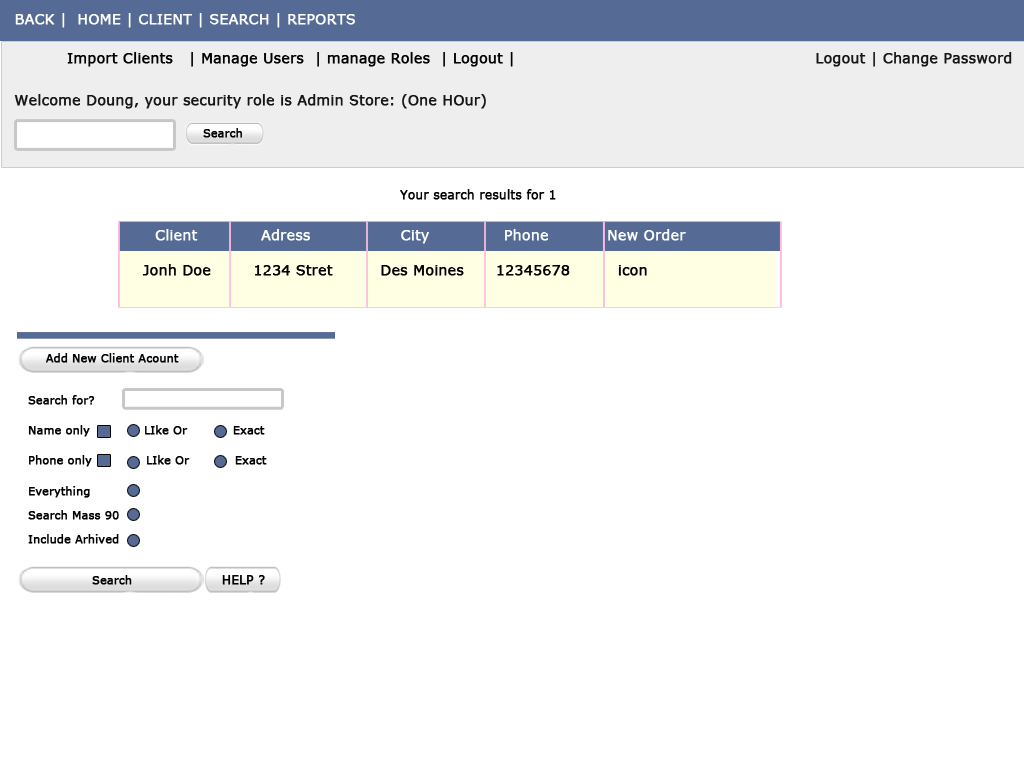
<style>
.page{position:relative;width:1024px;height:768px;background:#ffffff}
.page>*{position:absolute;margin:0}
.t1{font:14px "Verdana";color:#ffffff;text-transform:uppercase;font-weight:bold}
.t2{font:14px "Verdana";color:#000000;font-weight:bold}
.t3{font:14px "Verdana";color:#161616;font-weight:bold}
.t4{font:11px "Verdana";color:#000000;font-weight:bold}
.t5{font:12px "Verdana";color:#000000;font-weight:bold}
.t6{font:14px "Verdana";color:#ffffff;font-weight:bold}
.t7{font:11px/24px "Verdana";color:#000000;font-weight:bold}
.t8{font:12px "Verdana";color:#000000;text-transform:uppercase;font-weight:bold}
</style>
<div class="page">
<p class="t1" style="left:15px;top:13px;width:340px;height:15px">Back |  home | client | search | reports</p>
<p class="t2" style="left:67px;top:52px;width:446px;height:15px">Import Clients   | Manage Users  | manage Roles  | Logout |</p>
<p class="t3" style="left:816px;top:52px;width:196px;height:15px">Logout | Change Password</p>
<p class="t3" style="left:14px;top:94px;width:472px;height:15px">Welcome Doung, your security role is Admin Store: (One HOur)</p>
<p class="t4" style="left:203px;top:128px;width:39px;height:10px">Search</p>
<p class="t5" style="left:400px;top:189px;width:156px;height:11px">Your search results for 1</p>
<p class="t6" style="left:155px;top:229px;width:531px;height:15px">Client            Adress                 City              Phone           New Order</p>
<p class="t2" style="left:142px;top:264px;width:505px;height:12px">Jonh Doe        1234 Stret         Des Moines      12345678         icon</p>
<p class="t4" style="left:46px;top:353px;width:133px;height:10px">Add New Client Acount</p>
<p class="t4" style="left:28px;top:395px;width:67px;height:10px">Search for?</p>
<p class="t4" style="left:28px;top:425px;width:237px;height:12px">Name only             LIke Or           Exact</p>
<p class="t4" style="left:29px;top:455px;width:238px;height:12px">Phone only             LIke Or           Exact</p>
<p class="t7" style="left:28px;top:486px;width:91px;height:58px">Everything  Search Mass 90   Include Arhived</p>
<p class="t4" style="left:92px;top:575px;width:40px;height:10px">Search</p>
<p class="t8" style="left:222px;top:575px;width:43px;height:10px">Help ?</p>
</div>
